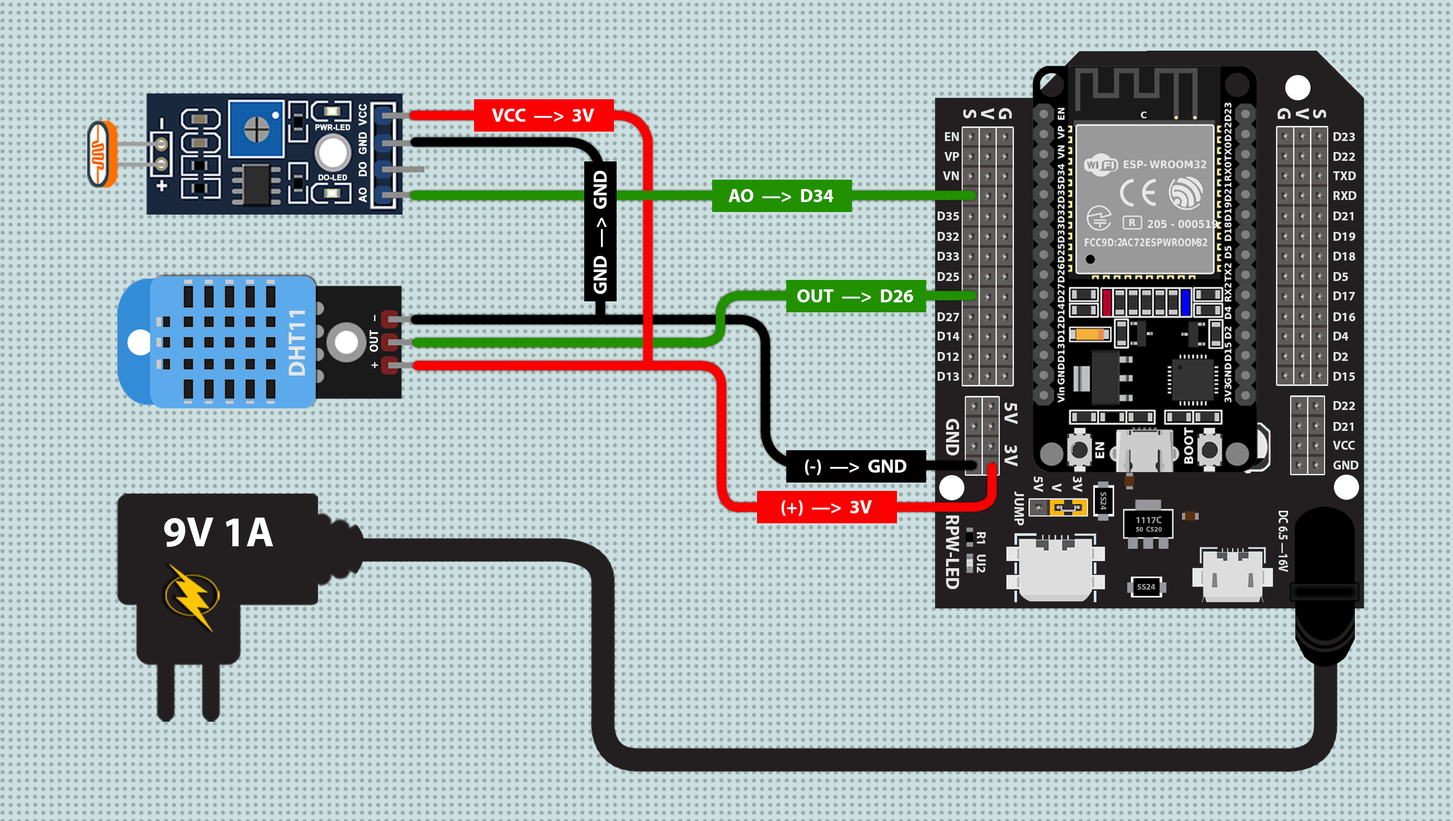
<style>
.page{position:relative;width:1453px;height:821px;background:#cce0e1}
.page>*{position:absolute;margin:0}
.t1{font:10.9px "Arial-BoldMT";color:#ffffff;font-weight:bold;scale:0.92 1}
.t2{font:32.6px "MyriadPro-Bold";color:#ffffff}
.t3{font:32.1px "MyriadPro-Bold";color:#e5e5e5}
.t4{font:8px "Arial-BoldMT";color:#ffffff;font-weight:bold;scale:0.92 1}
.t5{font:21.8px "MyriadPro-Bold";color:#e5e5e5}
.t6{font:40.1px "MyriadPro-Bold";color:#e5e5e5}
.t7{font:20.5px "MyriadPro-Bold";color:#ffffff;scale:2.01 1}
.t8{font:20.5px "MyriadPro-Bold";color:#ffffff;scale:0.95 1}
.t9{font:23.6px "MyriadPro-Bold";color:#e5e5e5}
.t10{font:14.5px "MyriadPro-Bold";color:#9f9f9f}
.t11{font:42.6px "MyriadPro-Bold";color:#ffffff}
.t12{font:12.5px/10px "MyriadPro-Bold";color:#9f9f9f;scale:0.96 1}
.t13{font:16.6px/10px "MyriadPro-Bold";color:#9f9f9f;scale:0.96 1}
.t14{font:23.6px "MyriadPro-Bold";color:#e5e5e5;scale:0.78 1}
</style>
<div class="page">
<p class="t1" style="left:359px;top:104px;width:8px;height:22px;rotate:-90deg">VCC</p>
<p class="t2" style="left:492px;top:109px;width:102px;height:13px">VCC  —&gt;  3V</p>
<p class="t3" style="left:963px;top:109px;width:13px;height:10px;rotate:90deg">S</p>
<p class="t3" style="left:981px;top:108px;width:13px;height:12px;rotate:90deg">V</p>
<p class="t3" style="left:999px;top:108px;width:13px;height:11px;rotate:90deg">G</p>
<p class="t3" style="left:1278px;top:108px;width:13px;height:11px;rotate:90deg">G</p>
<p class="t3" style="left:1296px;top:108px;width:13px;height:12px;rotate:90deg">V</p>
<p class="t3" style="left:1313px;top:109px;width:13px;height:10px;rotate:90deg">S</p>
<p class="t4" style="left:315px;top:124px;width:35px;height:7px">PWR-LED</p>
<p class="t1" style="left:359px;top:132px;width:8px;height:23px;rotate:-90deg">GND</p>
<p class="t5" style="left:945px;top:132px;width:14px;height:9px">EN</p>
<p class="t5" style="left:1333px;top:132px;width:22px;height:9px">D23</p>
<p class="t1" style="left:359px;top:162px;width:8px;height:14px;rotate:-90deg">DO</p>
<p class="t5" style="left:944px;top:152px;width:15px;height:9px">VP</p>
<p class="t5" style="left:1333px;top:152px;width:22px;height:9px">D22</p>
<p class="t2" style="left:594px;top:171px;width:13px;height:123px;rotate:-90deg">GND  —&gt;  GND</p>
<p class="t5" style="left:943px;top:171px;width:16px;height:9px">VN</p>
<p class="t5" style="left:1333px;top:171px;width:23px;height:9px">TXD</p>
<p class="t4" style="left:318px;top:174px;width:29px;height:7px">DO-LED</p>
<p class="t1" style="left:359px;top:187px;width:8px;height:16px;rotate:-90deg">AO</p>
<p class="t2" style="left:728px;top:189px;width:105px;height:13px">AO  —&gt;  D34</p>
<p class="t5" style="left:1333px;top:191px;width:23px;height:9px">RXD</p>
<p class="t5" style="left:938px;top:211px;width:21px;height:9px">D35</p>
<p class="t5" style="left:1333px;top:211px;width:20px;height:9px">D21</p>
<p class="t5" style="left:938px;top:232px;width:21px;height:9px">D32</p>
<p class="t5" style="left:1333px;top:232px;width:22px;height:9px">D19</p>
<p class="t5" style="left:938px;top:252px;width:21px;height:9px">D33</p>
<p class="t5" style="left:1333px;top:252px;width:22px;height:9px">D18</p>
<p class="t5" style="left:938px;top:272px;width:21px;height:9px">D25</p>
<p class="t5" style="left:1333px;top:272px;width:15px;height:9px">D5</p>
<p class="t2" style="left:797px;top:289px;width:116px;height:13px">OUT  —&gt;  D26</p>
<p class="t5" style="left:1333px;top:291px;width:22px;height:9px">D17</p>
<p class="t6" style="left:289px;top:311px;width:16px;height:64px;rotate:-90deg">DHT11</p>
<p class="t7" style="left:374px;top:315px;width:1px;height:6px;rotate:-90deg">-</p>
<p class="t5" style="left:938px;top:312px;width:21px;height:9px">D27</p>
<p class="t5" style="left:1333px;top:312px;width:22px;height:9px">D16</p>
<p class="t8" style="left:370px;top:330px;width:8px;height:22px;rotate:-90deg">OUT</p>
<p class="t5" style="left:938px;top:332px;width:22px;height:8px">D14</p>
<p class="t5" style="left:1333px;top:332px;width:16px;height:8px">D4</p>
<p class="t5" style="left:938px;top:352px;width:21px;height:9px">D12</p>
<p class="t5" style="left:1333px;top:352px;width:15px;height:9px">D2</p>
<p class="t8" style="left:371px;top:362px;width:7px;height:6px;rotate:-90deg">+</p>
<p class="t5" style="left:938px;top:372px;width:21px;height:9px">D13</p>
<p class="t5" style="left:1333px;top:372px;width:22px;height:9px">D15</p>
<p class="t3" style="left:1004px;top:402px;width:14px;height:22px;rotate:90deg">5V</p>
<p class="t5" style="left:1333px;top:401px;width:22px;height:9px">D22</p>
<p class="t3" style="left:946px;top:419px;width:13px;height:36px;rotate:90deg">GND</p>
<p class="t5" style="left:1333px;top:422px;width:20px;height:9px">D21</p>
<p class="t3" style="left:1004px;top:444px;width:14px;height:22px;rotate:90deg">3V</p>
<p class="t5" style="left:1333px;top:441px;width:22px;height:9px">VCC</p>
<p class="t2" style="left:805px;top:459px;width:101px;height:16px">(-)  —&gt;  GND</p>
<p class="t5" style="left:1333px;top:460px;width:25px;height:9px">GND</p>
<p class="t9" style="left:1034px;top:476px;width:9px;height:16px;rotate:90deg">5V</p>
<p class="t9" style="left:1052px;top:483px;width:9px;height:9px;rotate:90deg">V</p>
<p class="t9" style="left:1073px;top:476px;width:9px;height:16px;rotate:90deg">3V</p>
<p class="t9" style="left:1014px;top:491px;width:10px;height:34px;rotate:90deg">JUMP</p>
<p class="t10" style="left:1101px;top:492px;width:5px;height:18px;rotate:90deg">SS24</p>
<p class="t2" style="left:782px;top:500px;width:90px;height:16px">(+)  —&gt;  3V</p>
<p class="t11" style="left:164px;top:517px;width:109px;height:30px">9V 1A</p>
<p class="t3" style="left:946px;top:515px;width:13px;height:74px;rotate:90deg">RPW-LED</p>
<p class="t12" style="left:1136px;top:516px;width:26px;height:15px;text-align:center"><span class="t13">1117C<br></span>50  C520</p>
<p class="t14" style="left:1279px;top:511px;width:9px;height:61px;rotate:90deg">DC 6.5 —16V</p>
<p class="t5" style="left:977px;top:532px;width:9px;height:11px;rotate:90deg">R1</p>
<p class="t5" style="left:977px;top:554px;width:9px;height:19px;rotate:90deg">UI2</p>
<p class="t10" style="left:1137px;top:584px;width:18px;height:5px">SS24</p>
</div>
